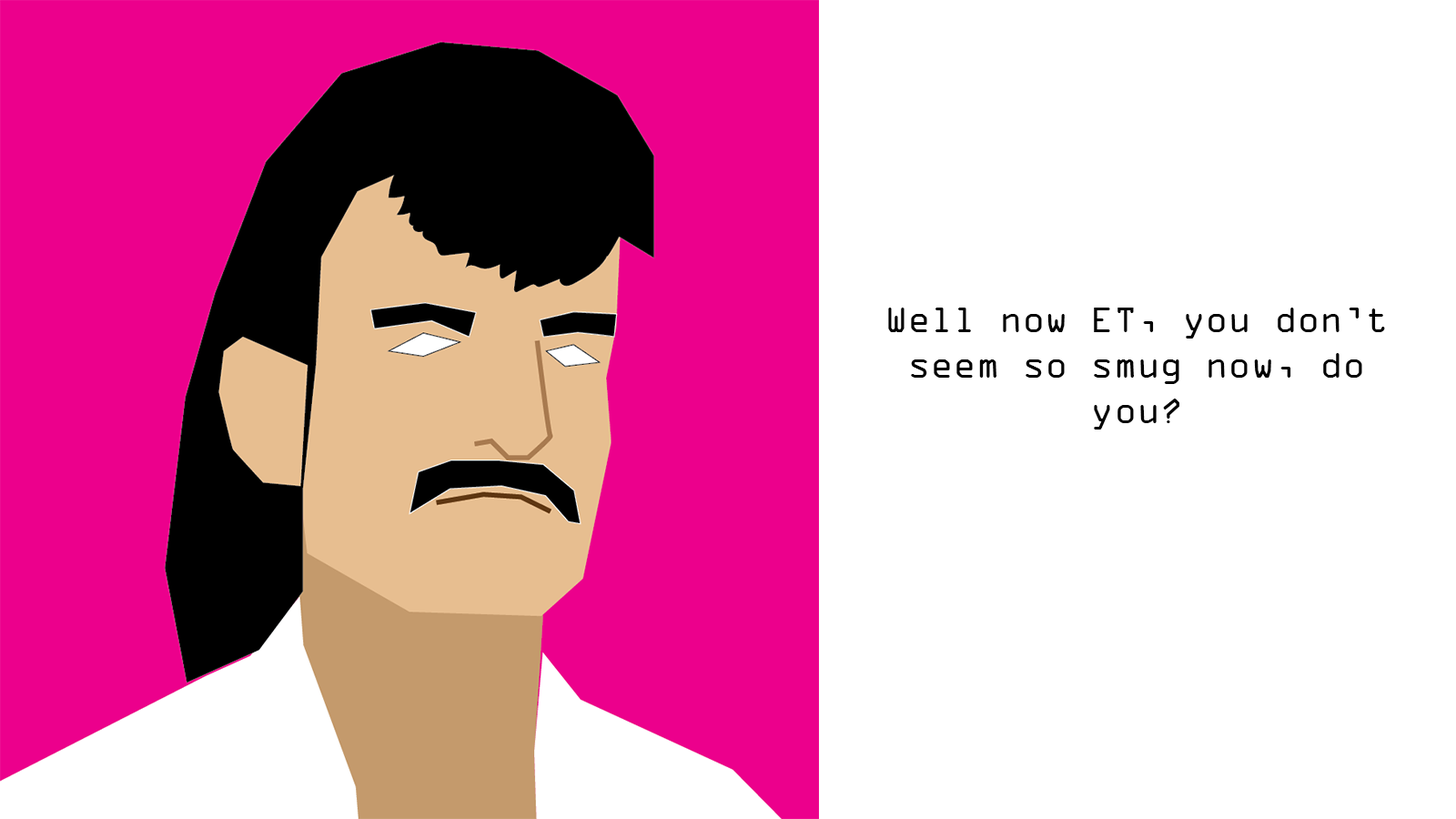
<style>
.page{position:relative;width:1456px;height:819px;background:#ffffff}
.page>*{position:absolute;margin:0}
.t1{font:37.9px "OCRAExtended";color:#000000}
</style>
<div class="page">
<p class="t1" style="left:888px;top:308px;width:497px;height:122px;text-align:center">Well now ET, you don’t seem so smug now, do you?</p>
</div>
